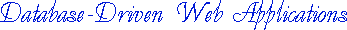
<style>
.page{position:relative;width:347px;height:30px;background:#ffffff}
.page>*{position:absolute;margin:0}
.t1{font:30px "UkrainianDecor";color:#0019d7}
</style>
<div class="page">
<p class="t1" style="left:0px;top:0px;width:347px;height:30px">Database-Driven Web Applications</p>
</div>
